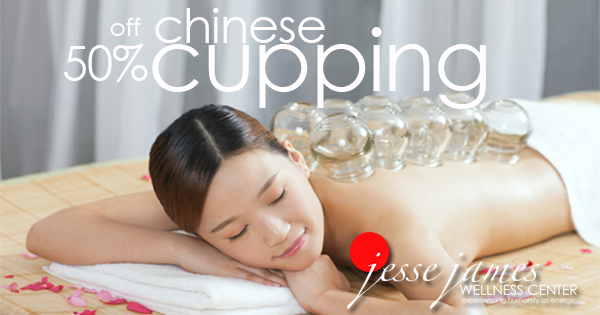
<style>
.page{position:relative;width:600px;height:315px}
.page>*{position:absolute;margin:0}
.t1{font:48px "CenturyGothic";letter-spacing:-0.02em;color:#fffdfd}
.t2{font:25px "CenturyGothic";letter-spacing:-0.02em;color:#fffdfd}
.t3{font:86.4px "CenturyGothic";letter-spacing:-0.02em;color:#fffdfd}
.t4{font:47.5px "CenturyGothic";letter-spacing:-0.02em;color:#fffdfd}
</style>
<div class="page">
<p class="t1" style="left:155px;top:8px;width:170px;height:35px">chinese</p>
<p class="t2" style="left:110px;top:18px;width:31px;height:18px">off</p>
<p class="t3" style="left:152px;top:27px;width:334px;height:82px">cupping</p>
<p class="t4" style="left:64px;top:44px;width:84px;height:38px">50%</p>
</div>
